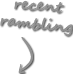
<style>
.page{position:relative;width:73px;height:74px;background:#ffffff}
.page>*{position:absolute;margin:0}
.t1{font:15.5px "SegoeScript-Bold";color:#929292}
</style>
<div class="page">
<p class="t1" style="left:0px;top:0px;width:73px;height:36px;text-align:center;rotate:6deg">recent<br>rambling</p>
</div>
